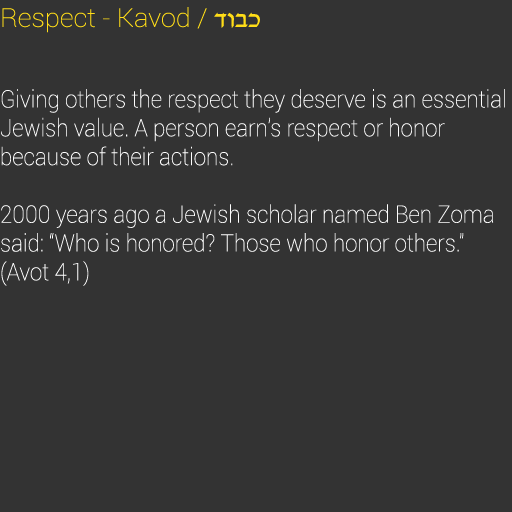
<style>
.page{position:relative;width:512px;height:512px;background:#333333}
.page>*{position:absolute;margin:0}
.t1{font:26px "Roboto-Thin";color:#ffdd17;scale:1.04 1}
.t2{font:26px "David";color:#ffdd17;scale:1.04 1}
.t3{font:24px "Roboto-Thin";color:#ffffff;scale:0.93 1}
</style>
<div class="page">
<p class="t1" style="left:2px;top:7px;width:258px;height:26px">Respect - Kavod / <span class="t2">דובכ</span></p>
<p class="t3" style="left:1px;top:89px;width:504px;height:197px">Giving others the respect they deserve is an essential Jewish value. A person earn’s respect or honor <br>because of their actions. <br><br>2000 years ago a Jewish scholar named Ben Zoma said: “Who is honored? Those who honor others." (Avot 4,1)</p>
</div>
